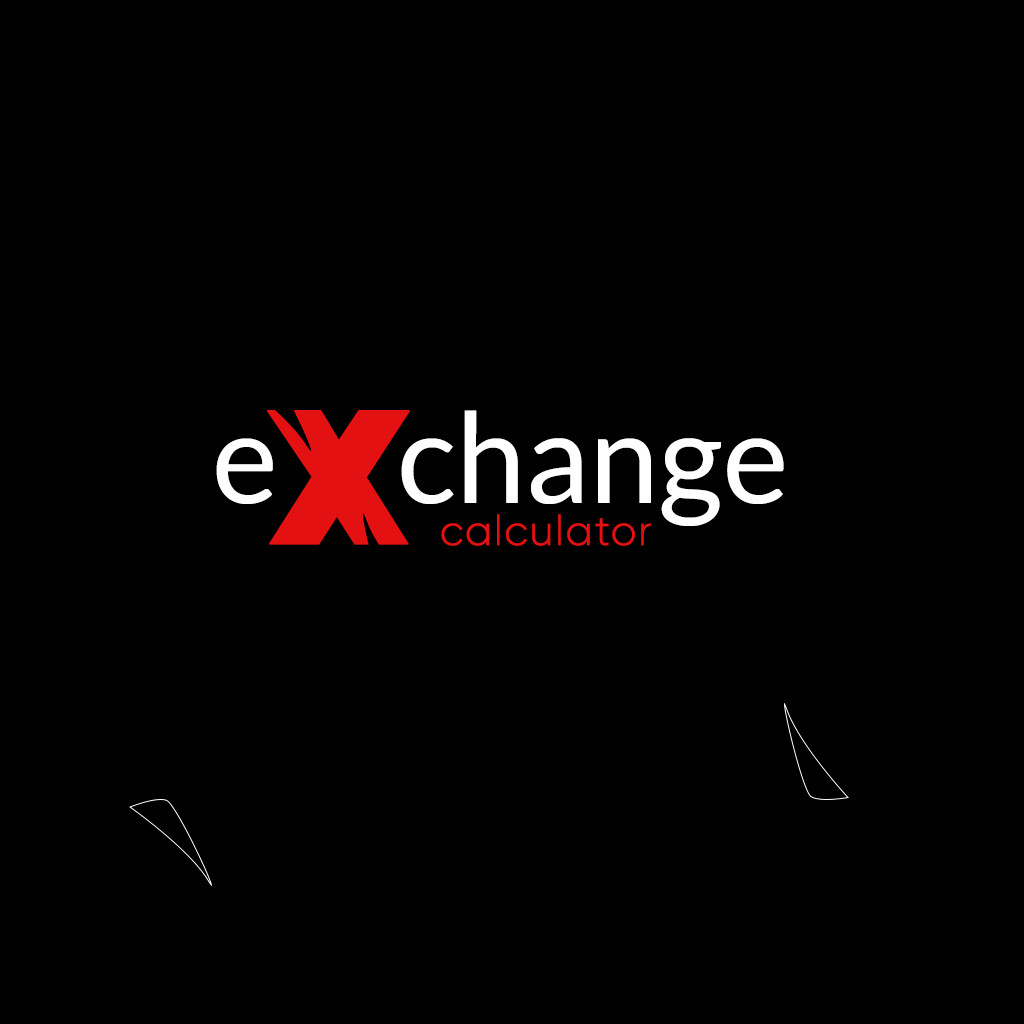
<style>
.page{position:relative;width:1024px;height:1024px;background:#000000}
.page>*{position:absolute;margin:0}
.t1{font:166.7px "SansPosterBoldJL";letter-spacing:0.02em;color:#e31111;font-weight:bold}
.t2{font:125.4px "Lato-Regular";color:#ffffff}
.t3{font:41.7px "Gilroy-Light";letter-spacing:0.02em;color:#e31111;font-weight:bold}
</style>
<div class="page">
<p class="t1" style="left:267px;top:410px;width:143px;height:135px">X</p>
<p class="t2" style="left:401px;top:410px;width:383px;height:116px">change</p>
<p class="t2" style="left:216px;top:438px;width:57px;height:66px">e</p>
<p class="t3" style="left:441px;top:514px;width:210px;height:32px">calculator</p>
</div>
